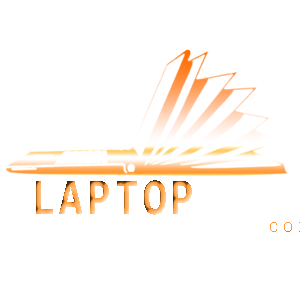
<style>
.page{position:relative;width:300px;height:300px;background:#ffffff}
.page>*{position:absolute;margin:0}
.t1{font:52.3px "Consolas-Bold";letter-spacing:0.1em;scale:0.82 1}
</style>
<div class="page">
<p class="t1" style="left:36px;top:180px;width:156px;height:35px">LAPTOP</p>
</div>
